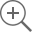
<style>
.page{position:relative;width:32px;height:32px;background:#ffffff}
.page>*{position:absolute;margin:0}
.t1{font:24px "Avenir-Roman";color:#666666}
</style>
<div class="page">
<p class="t1" style="left:7px;top:7px;width:12px;height:12px">+</p>
</div>
